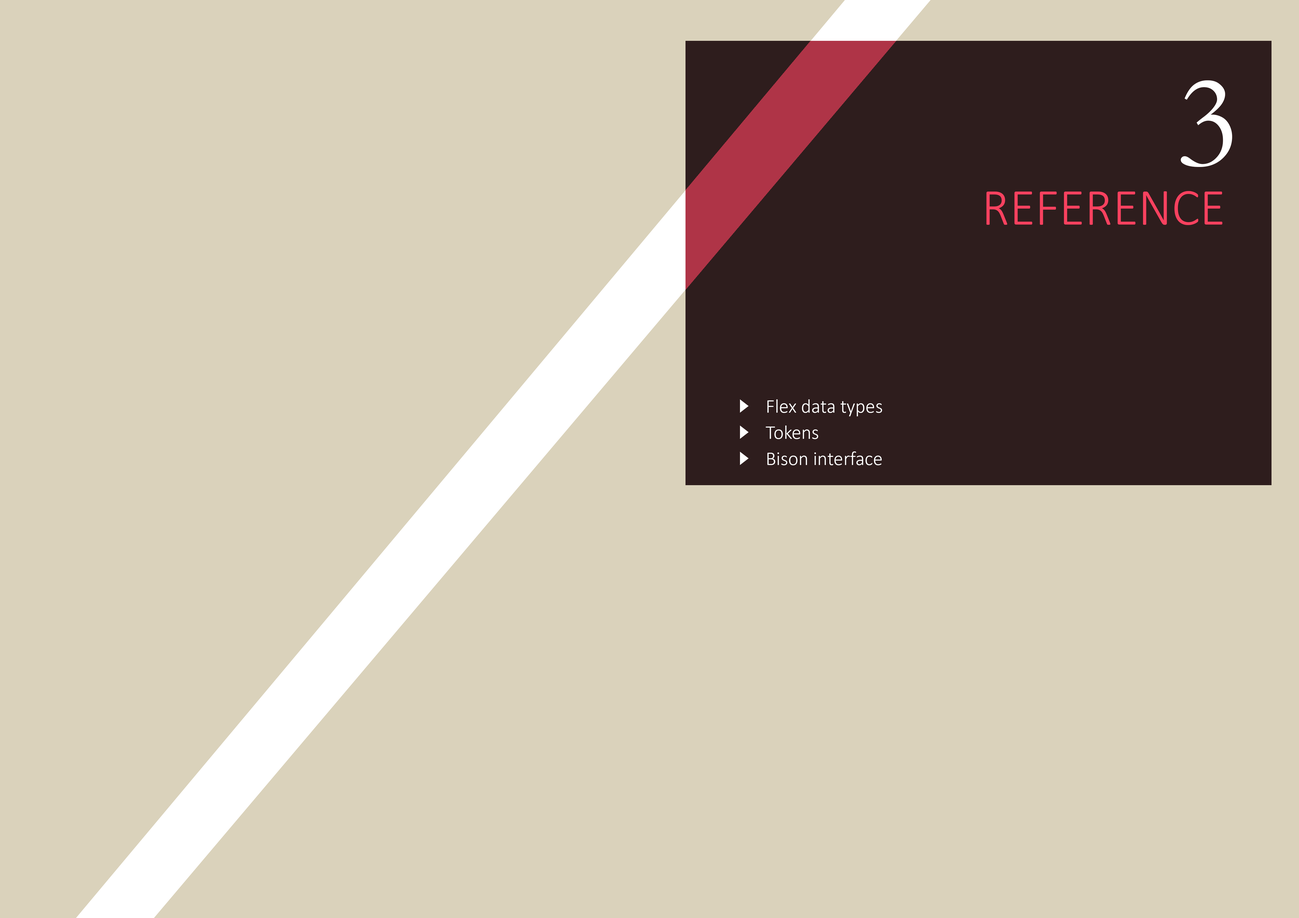
<style>
.page{position:relative;width:1299px;height:918px;background:#dad2bb}
.page>*{position:absolute;margin:0}
.t1{font:133.1px "Garamond";color:#ffffff}
.t2{font:52.4px "Calibri-Light";color:#f8415f;text-transform:uppercase}
.t3{font:19.6px/26.2px "Calibri-Light";color:#ffffff}
</style>
<div class="page">
<p class="t1" style="left:1180px;top:80px;width:52px;height:87px">3</p>
<p class="t2" style="left:986px;top:191px;width:236px;height:34px">Reference</p>
<p class="t3" style="left:765px;top:399px;width:117px;height:66px">Flex data types<br>Tokens<br>Bison interface</p>
</div>
